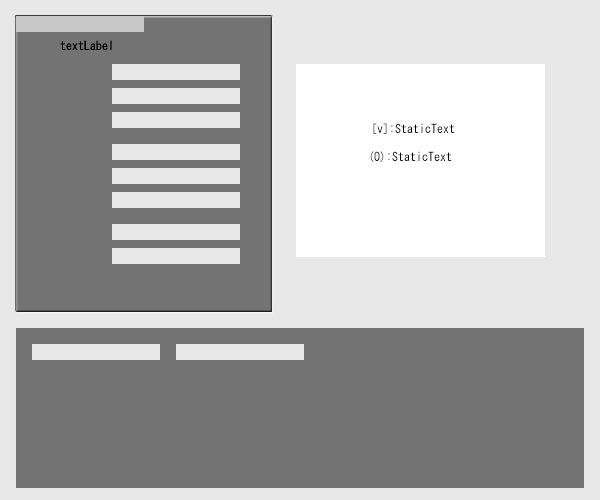
<style>
.page{position:relative;width:600px;height:500px;background:#737373}
.page>*{position:absolute;margin:0}
.t1{font:12px "MS-Gothic";color:#000000}
</style>
<div class="page">
<p class="t1" style="left:60px;top:40px;width:52px;height:10px">textLabel</p>
<p class="t1" style="left:60px;top:40px;width:52px;height:10px">textLabel</p>
<p class="t1" style="left:373px;top:123px;width:82px;height:11px">[v]:StaticText</p>
<p class="t1" style="left:370px;top:151px;width:82px;height:11px">(O):StaticText</p>
</div>
